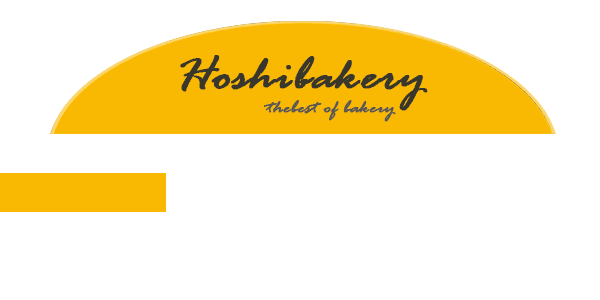
<style>
.page{position:relative;width:600px;height:300px;background:#ffffff}
.page>*{position:absolute;margin:0}
.t1{font:49.3px "RageItalic";color:#39362c;font-weight:bold;scale:1.1 1}
.t2{font:19.3px "RageItalic";color:#5b5851;font-weight:bold;scale:1.1 1}
</style>
<div class="page">
<p class="t1" style="left:180px;top:55px;width:248px;height:56px">Hoshibakery</p>
<p class="t2" style="left:264px;top:100px;width:132px;height:22px">thebest of bakery</p>
</div>
